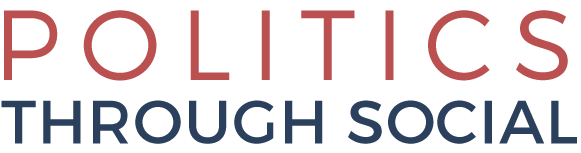
<style>
.page{position:relative;width:581px;height:153px;background:#ffffff}
.page>*{position:absolute;margin:0}
.t1{font:99.1px "Montserrat-Light";letter-spacing:0.2em;color:#bb5050}
.t2{font:61px "Montserrat-Regular";letter-spacing:0.025em;color:#2b405c}
</style>
<div class="page">
<p class="t1" style="left:4px;top:10px;width:564px;height:71px">POLITICS</p>
<p class="t2" style="left:1px;top:100px;width:576px;height:44px">THROUGH SOCIAL</p>
</div>
